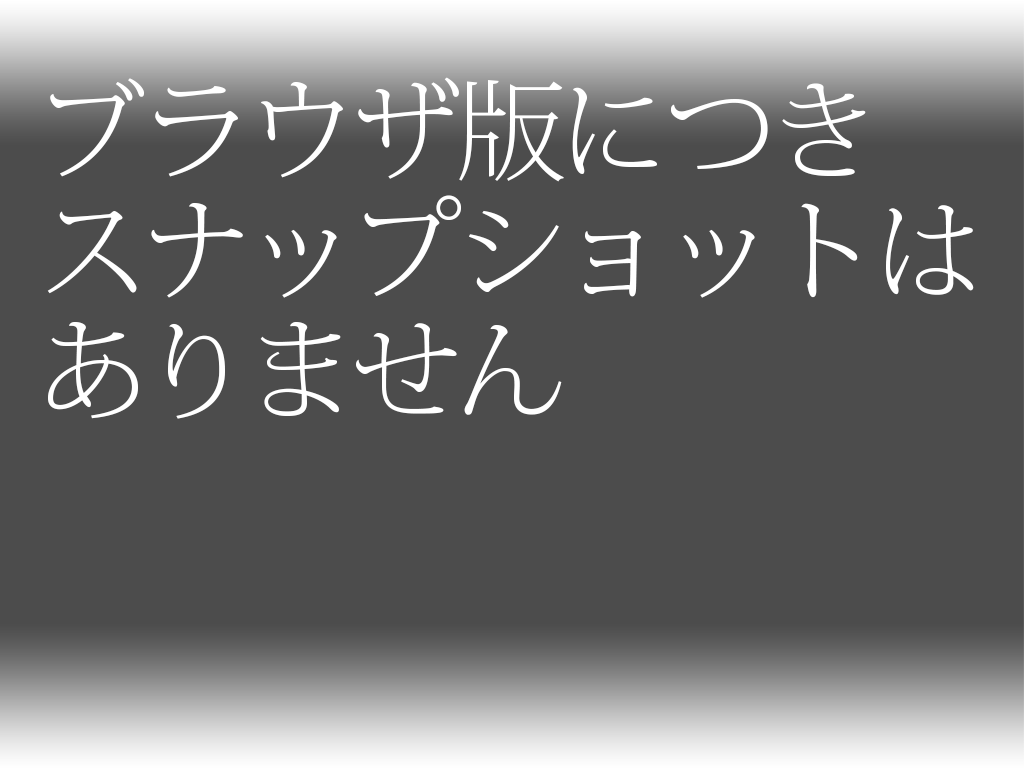
<style>
.page{position:relative;width:1024px;height:768px;background:#4c4c4c}
.page>*{position:absolute;margin:0}
.t1{font:110px/120px "KozMinPr6N-ExtraLight";letter-spacing:-0.05em;color:#ffffff}
</style>
<div class="page">
<p class="t1" style="left:47px;top:77px;width:927px;height:342px">ブラウザ版につき<br>スナップショットは<br>ありません</p>
</div>
